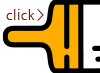
<style>
.page{position:relative;width:100px;height:73px;background:#ffffff}
.page>*{position:absolute;margin:0}
.t1{font:12.8px "NanumGothic";letter-spacing:0.06em;color:#67240a}
</style>
<div class="page">
<p class="t1" style="left:6px;top:9px;width:38px;height:12px;rotate:-90deg">click &gt;</p>
</div>
